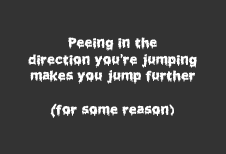
<style>
.page{position:relative;width:226px;height:154px;background:#333333}
.page>*{position:absolute;margin:0}
.t1{font:14px "Liquidismpart2";color:#ffffff}
</style>
<div class="page">
<p class="t1" style="left:28px;top:37px;width:169px;height:81px;text-align:center">Peeing in the<br>direction you're jumping<br>makes you jump further<br><br>(for some reason)</p>
</div>
